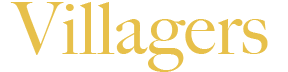
<style>
.page{position:relative;width:288px;height:72px;background:#ffffff}
.page>*{position:absolute;margin:0}
.t1{font:72px "BigCaslon-Medium";color:#e7c04a}
</style>
<div class="page">
<p class="t1" style="left:10px;top:2px;width:258px;height:70px">Villagers</p>
</div>
